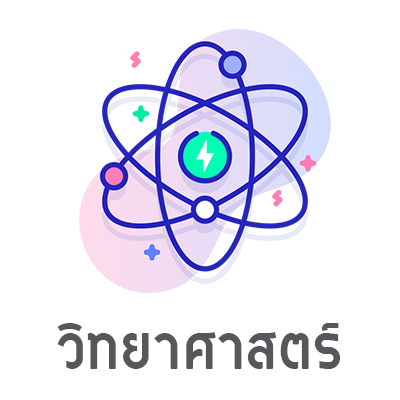
<style>
.page{position:relative;width:400px;height:400px;background:#ffffff}
.page>*{position:absolute;margin:0}
.t1{font:83.3px "Circular-Bold";color:#56585b}
</style>
<div class="page">
<p class="t1" style="left:57px;top:323px;width:284px;height:46px">วิทยาศาสตร์</p>
</div>
